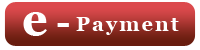
<style>
.page{position:relative;width:200px;height:50px;background:#ffffff}
.page>*{position:absolute;margin:0}
.t1{font:45px "Georgia-Bold";letter-spacing:0.1em;color:#ffffff}
.t2{font:20px "Georgia-Bold";letter-spacing:0.1em;color:#ffffff}
.t3{font:38px "Georgia-Bold";letter-spacing:0.1em;color:#ffffff}
</style>
<div class="page">
<p class="t1" style="left:23px;top:12px;width:24px;height:24px">e</p>
<p class="t2" style="left:76px;top:17px;width:103px;height:18px">Payment</p>
<p class="t3" style="left:57px;top:23px;width:12px;height:4px">-</p>
</div>
